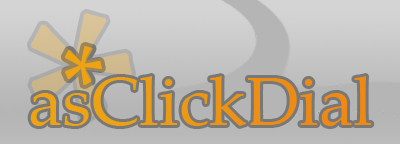
<style>
.page{position:relative;width:400px;height:144px}
.page>*{position:absolute;margin:0}
.t1{font:300.9px "PalatinoLinotype-Roman"}
.t2{font:109.6px "PalatinoLinotype-Roman";color:#eda314}
.t3{font:68px "PalatinoLinotype-Roman";color:#eda314}
</style>
<div class="page">
<p class="t1" style="left:31px;top:12px;width:102px;height:108px">*</p>
<p class="t2" style="left:64px;top:46px;width:38px;height:39px">*</p>
<p class="t3" style="left:30px;top:76px;width:342px;height:50px">asClickDial</p>
</div>
